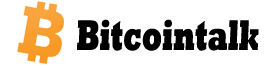
<style>
.page{position:relative;width:266px;height:66px;background:#ffffff}
.page>*{position:absolute;margin:0}
.t1{font:43.5px "Rockwell-ExtraBold";color:#010100;scale:0.63 1}
</style>
<div class="page">
<p class="t1" style="left:77px;top:19px;width:182px;height:32px">Bitcointalk</p>
</div>
